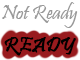
<style>
.page{position:relative;width:80px;height:60px;background:#ffffff}
.page>*{position:absolute;margin:0}
.t1{font:20.8px "Pristina-Regular";color:#999999}
.t2{font:20.8px "Pristina-Regular";color:#000000;font-weight:bold}
</style>
<div class="page">
<p class="t1" style="left:2px;top:2px;width:76px;height:26px">Not Ready</p>
<p class="t2" style="left:4px;top:37px;width:72px;height:19px">READY</p>
</div>
